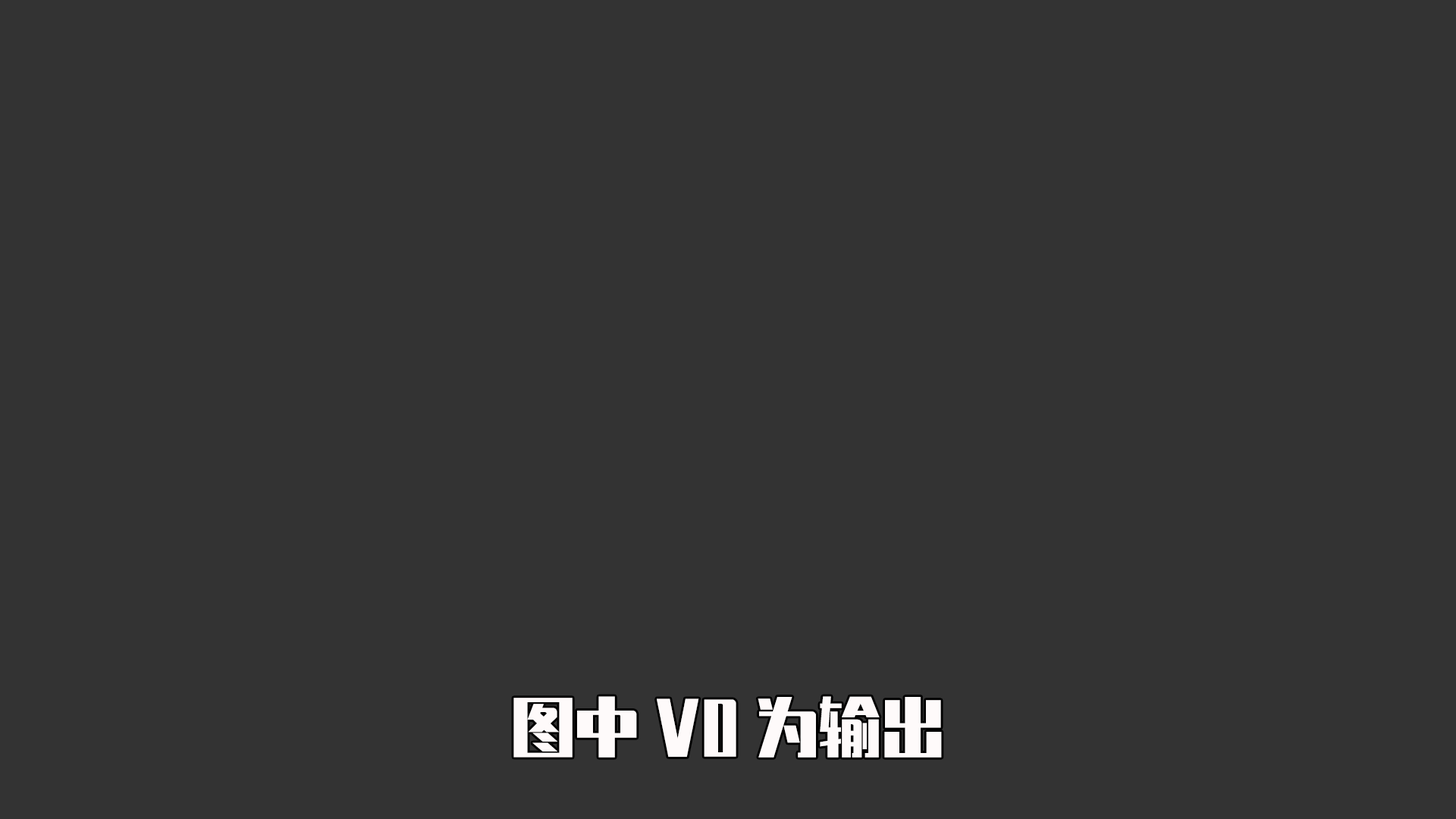
<style>
.page{position:relative;width:1456px;height:819px;background:#333333}
.page>*{position:absolute;margin:0}
.t1{font:63.2px "ZhenyanGB-Regular";color:#fefafa}
</style>
<div class="page">
<p class="t1" style="left:513px;top:696px;width:429px;height:62px">图中V0为输出</p>
</div>
